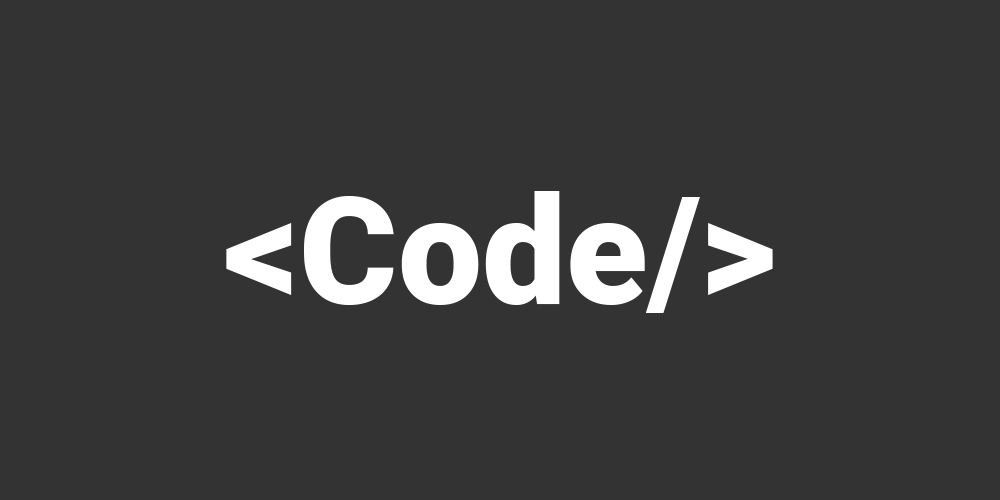
<style>
.page{position:relative;width:1000px;height:500px;background:#333333}
.page>*{position:absolute;margin:0}
.t1{font:150px "Roboto-Black";color:#ffffff}
</style>
<div class="page">
<p class="t1" style="left:226px;top:191px;width:547px;height:122px">&lt;Code/&gt;</p>
<p class="t1" style="left:226px;top:191px;width:547px;height:122px">&lt;Code/&gt;</p>
</div>
